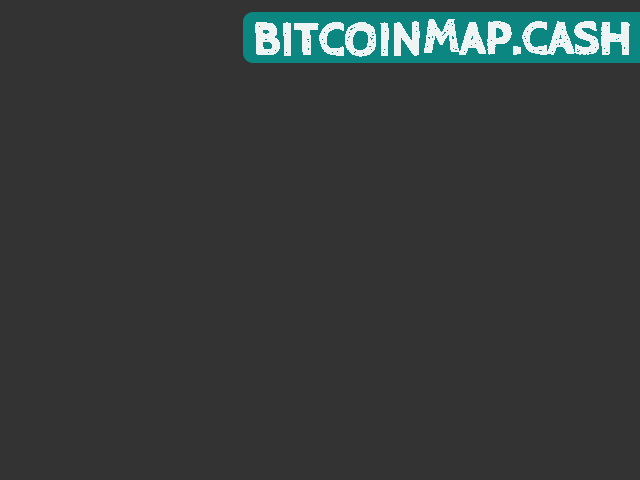
<style>
.page{position:relative;width:640px;height:480px;background:#333333}
.page>*{position:absolute;margin:0}
.t1{font:49.8px "CabinSketch-Bold";color:#ffffff;text-transform:uppercase;scale:0.94 1}
</style>
<div class="page">
<p class="t1" style="left:255px;top:19px;width:375px;height:38px;opacity:0.9">BITCOINMAP.CASH</p>
</div>
